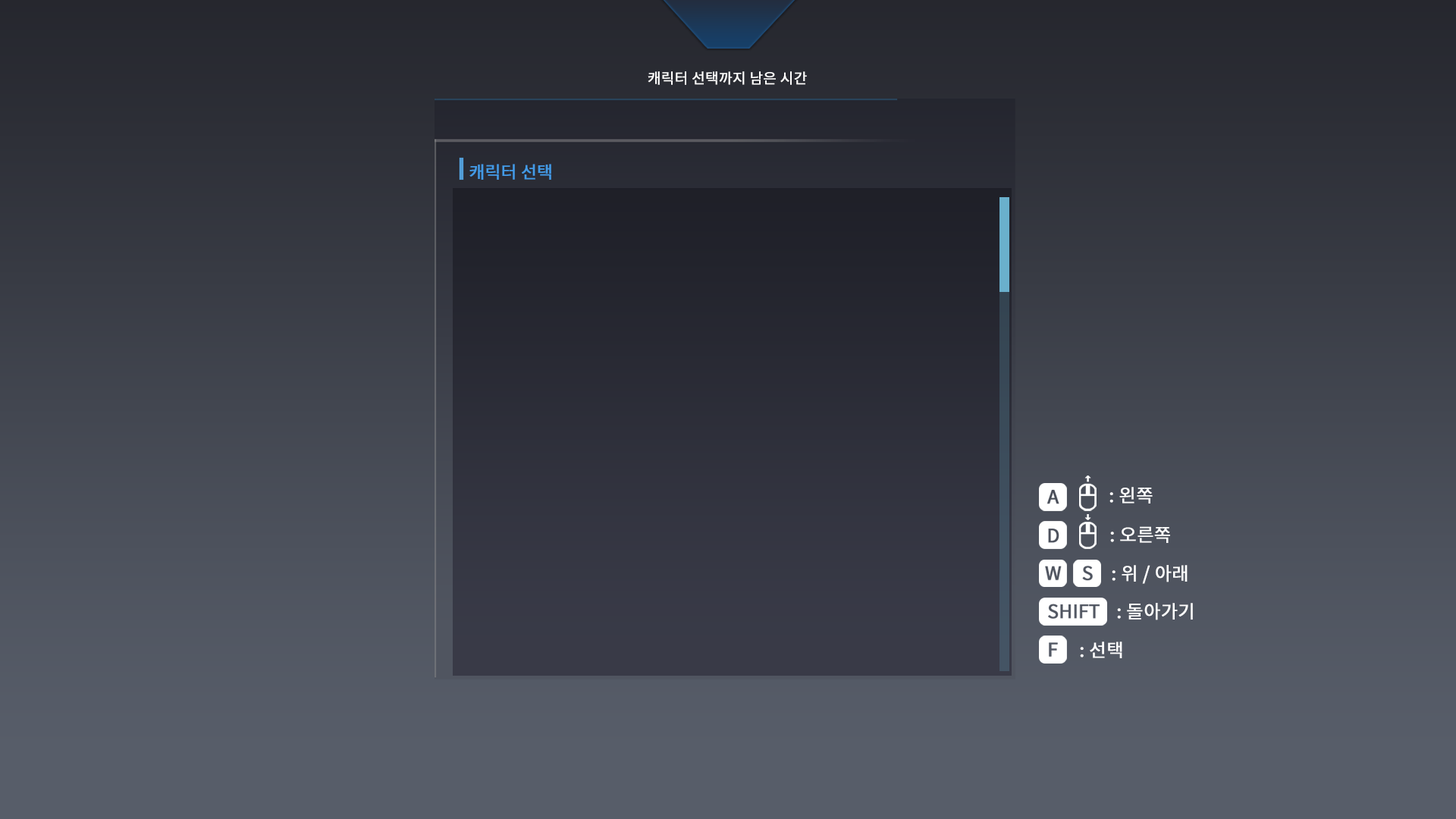
<style>
.page{position:relative;width:1456px;height:819px}
.page>*{position:absolute;margin:0}
.t1{font:14.5px "NotoSansCJKkr-Regular";letter-spacing:-0.01em;color:#ffffff;font-weight:bold}
.t2{font:17px "NotoSansCJKkr-Regular";letter-spacing:-0.01em;color:#439ae6;font-weight:bold}
.t3{font:18.3px "NotoSansCJKkr-Regular";letter-spacing:-0.01em;color:#ffffff;font-weight:bold}
</style>
<div class="page">
<p class="t1" style="left:648px;top:71px;width:159px;height:14px">캐릭터 선택까지 남은 시간</p>
<p class="t2" style="left:469px;top:164px;width:82px;height:16px">캐릭터 선택</p>
<p class="t3" style="left:1109px;top:487px;width:44px;height:17px">: 왼쪽</p>
<p class="t3" style="left:1110px;top:526px;width:60px;height:17px">: 오른쪽</p>
<p class="t3" style="left:1112px;top:565px;width:76px;height:19px">: 위 / 아래</p>
<p class="t3" style="left:1117px;top:603px;width:76px;height:17px">: 돌아가기</p>
<p class="t3" style="left:1080px;top:642px;width:42px;height:16px">: 선택</p>
</div>
